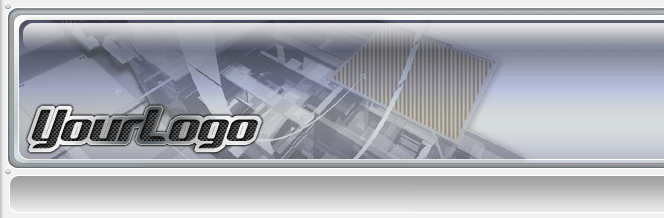
<style>
.page{position:relative;width:664px;height:218px}
.page>*{position:absolute;margin:0}
.t1{font:50.9px "Decipher";scale:0.94 1}
</style>
<div class="page">
<p class="t1" style="left:31px;top:109px;width:227px;height:40px">YourLogo</p>
</div>
